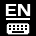
<style>
.page{position:relative;width:36px;height:36px;background:#000000}
.page>*{position:absolute;margin:0}
.t1{font:16px "Swiss721BT-BoldExtended";color:#ffffff}
</style>
<div class="page">
<p class="t1" style="left:5px;top:4px;width:26px;height:12px">EN</p>
</div>
